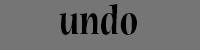
<style>
.page{position:relative;width:200px;height:50px;background:#757575}
.page>*{position:absolute;margin:0}
.t1{font:44px "NuevaStd-BoldCond";color:#000000}
</style>
<div class="page">
<p class="t1" style="left:59px;top:4px;width:78px;height:31px">undo</p>
</div>
